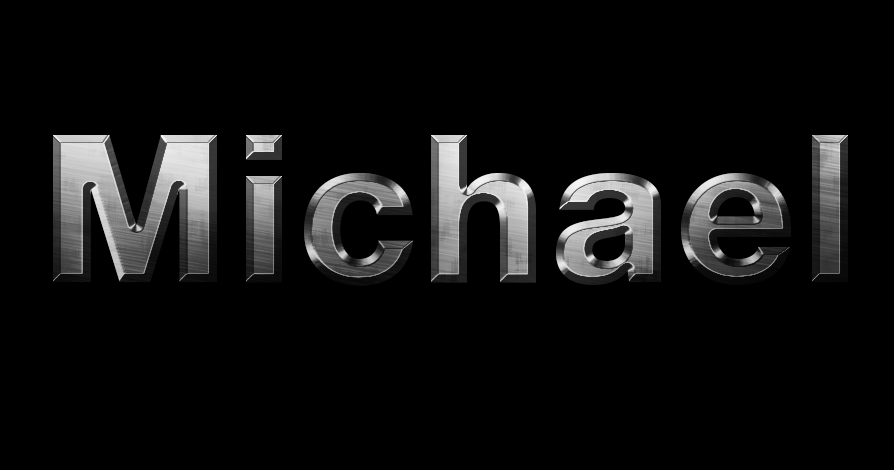
<style>
.page{position:relative;width:894px;height:470px;background:#000000}
.page>*{position:absolute;margin:0}
.t1{font:206px "AppleSDGothicNeo-Heavy"}
</style>
<div class="page">
<p class="t1" style="left:53px;top:135px;width:795px;height:151px">Michael</p>
</div>
